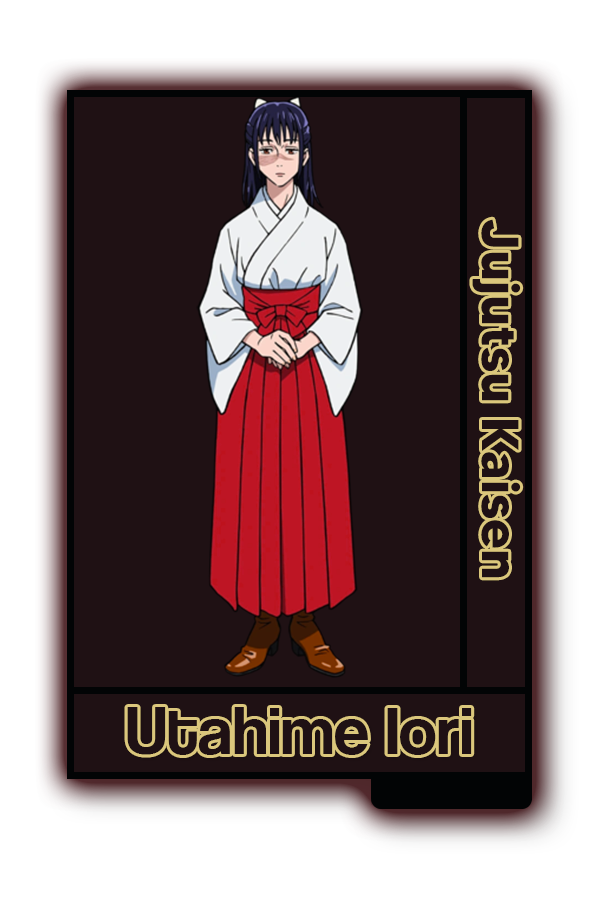
<style>
.page{position:relative;width:600px;height:900px;background:#1f1114}
.page>*{position:absolute;margin:0}
.t1{font:52px "MADETOMMY-Bold";color:#1e1214}
.t2{font:70.1px "CoolveticaRg-Regular";color:#1e1214}
</style>
<div class="page">
<p class="t1" style="left:472px;top:219px;width:49px;height:359px;rotate:90deg">Jujutsu Kaisen</p>
<p class="t2" style="left:127px;top:707px;width:345px;height:48px">Utahime Iori</p>
</div>
